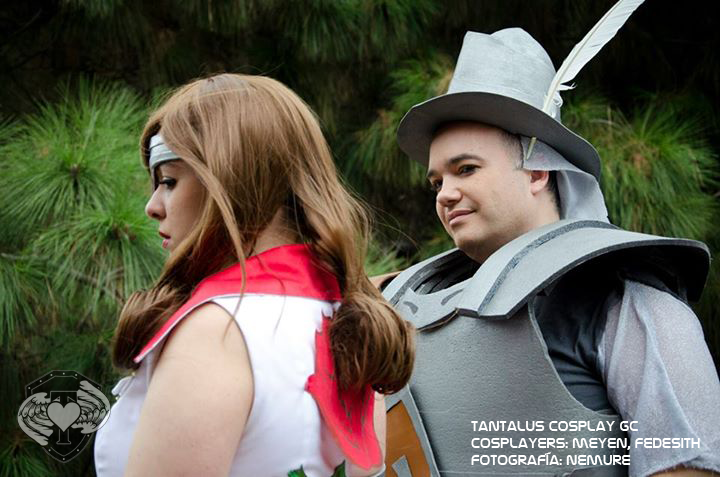
<style>
.page{position:relative;width:720px;height:477px}
.page>*{position:absolute;margin:0}
.t1{font:14px "NasalizationRg-Regular";color:#ffffff}
</style>
<div class="page">
<p class="t1" style="left:471px;top:421px;width:229px;height:44px">tantalus cosplay gc<br>cosplayers: meyen, fedesith<br>fotografía: nemure</p>
</div>
